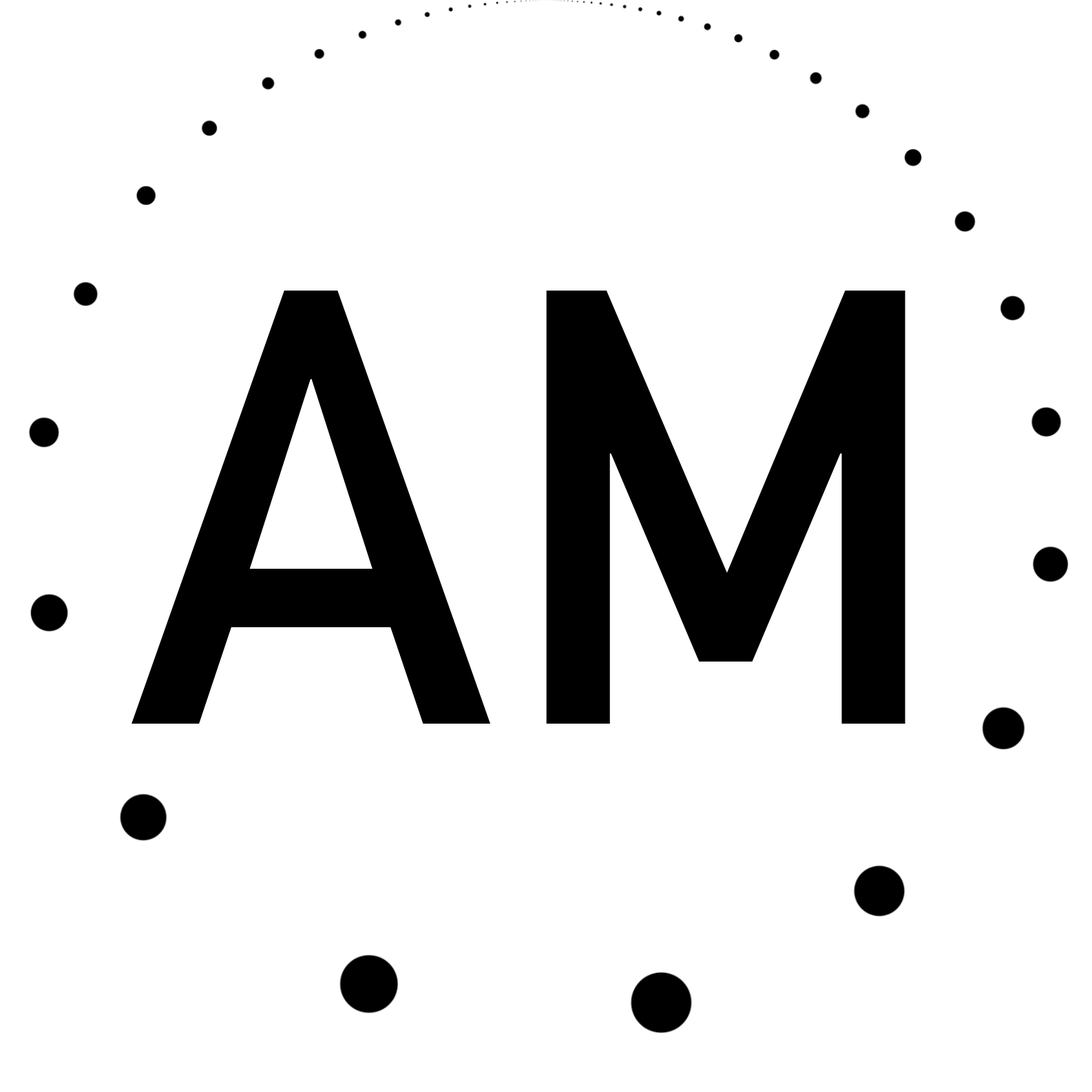
<style>
.page{position:relative;width:1092px;height:1092px;background:#ffffff}
.page>*{position:absolute;margin:0}
.t1{font:608.4px "DINAlternate-Bold";color:#000000}
</style>
<div class="page">
<p class="t1" style="left:132px;top:291px;width:773px;height:433px">AM</p>
</div>
